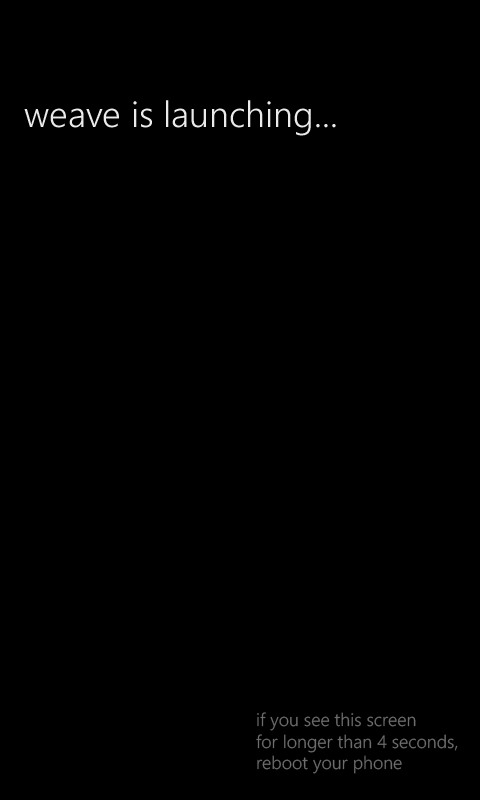
<style>
.page{position:relative;width:480px;height:800px;background:#000000}
.page>*{position:absolute;margin:0}
.t1{font:36px "SegoeWP-SemiLight";color:#ecebeb}
.t2{font:18px "SegoeWP-SemiLight";color:#6d6d6d}
</style>
<div class="page">
<p class="t1" style="left:24px;top:100px;width:312px;height:36px">weave is launching...</p>
<p class="t2" style="left:256px;top:712px;width:202px;height:62px">if you see this screen<br>for longer than 4 seconds, <br>reboot your phone</p>
</div>
